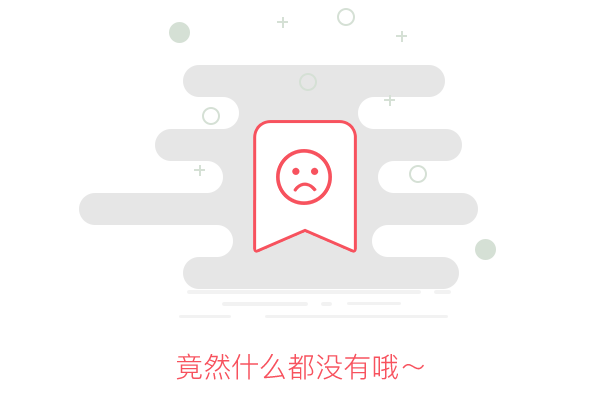
<style>
.page{position:relative;width:600px;height:400px;background:#ffffff}
.page>*{position:absolute;margin:0}
.t1{font:28px "PingFang-SC-Regular";color:#f7525e}
</style>
<div class="page">
<p class="t1" style="left:176px;top:353px;width:248px;height:27px">竟然什么都没有哦～</p>
</div>
